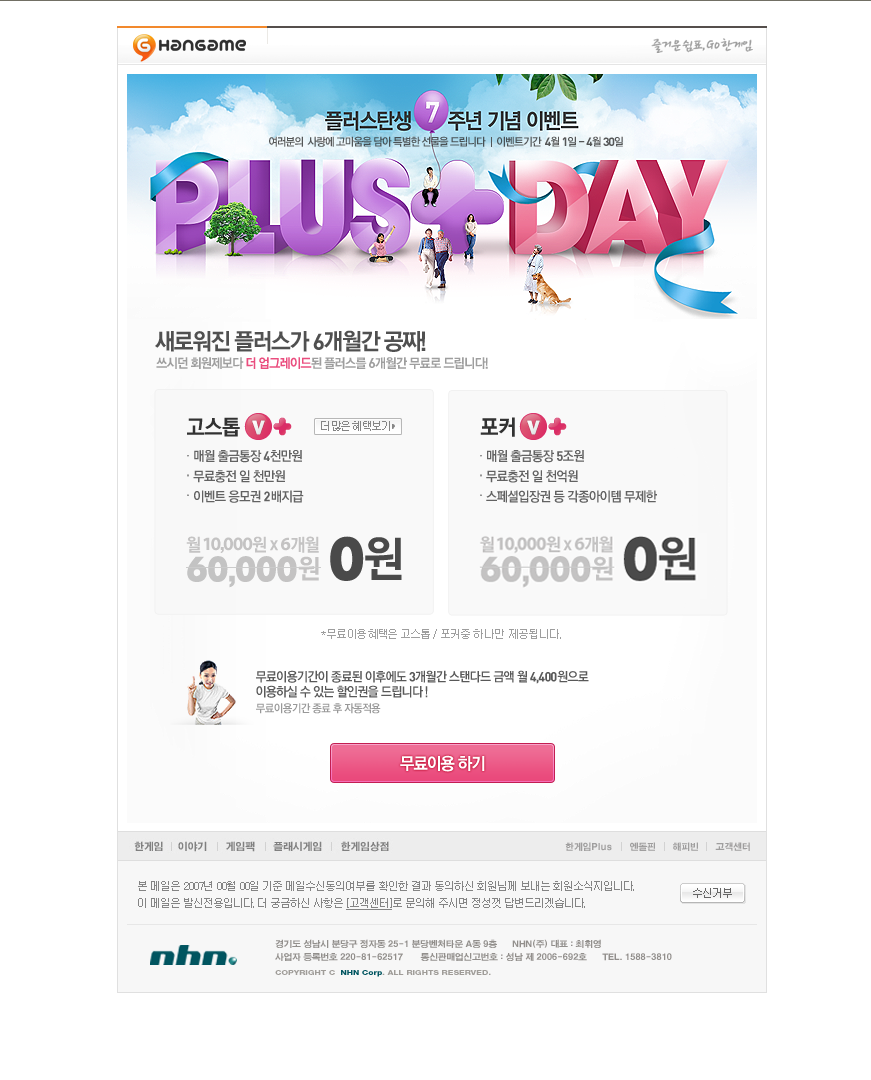
<style>
.page{position:relative;width:871px;height:1080px;background:#ffffff}
.page>*{position:absolute;margin:0}
.t1{font:11px "YGO540";letter-spacing:-0.09em;color:#4c5356}
.t2{font:11px "YGO540";letter-spacing:-0.08em;color:#545657}
.t3{font:12px "Dinbol";letter-spacing:-0.08em;color:#545657}
.t4{font:23px "YGO550";letter-spacing:-0.08em;color:#3d3d3d}
.t5{font:23px "Dinbol";letter-spacing:-0.08em;color:#3d3d3d}
.t6{font:13px "YGO550";letter-spacing:-0.08em;color:#9e9e9e}
.t7{font:13px "YGO550";letter-spacing:-0.08em;color:#ea4d7e}
.t8{font:14px "Dinbol";letter-spacing:-0.08em;color:#9e9e9e}
.t9{font:21.5px "YGO550";letter-spacing:-0.05em;color:#323232}
.t10{font:10.6px "YDIWebDotum";letter-spacing:-0.05em;color:#848484}
.t11{font:10.6px "Gulim";letter-spacing:-0.05em;color:#848484}
.t12{font:13.4px/20.2px "YGO540";letter-spacing:-0.065em;color:#626262;scale:0.96 1}
.t13{font:13.4px/20.2px "Dinbol";letter-spacing:-0.065em;color:#626262;scale:0.96 1}
.t14{font:18.7px "MyriadBold";letter-spacing:-0.08em;color:#c4c3c3}
.t15{font:17.8px "YGO550";letter-spacing:-0.08em;color:#c4c3c3;scale:0.97 1}
.t16{font:18.7px "Helvetica75-Bold";letter-spacing:-0.08em;color:#c4c3c3}
.t17{font:59.7px "FuturaBQ-Bold";letter-spacing:-0.04em;color:#4a4a4a;scale:0.95 1}
.t18{font:48.3px "YGO550";letter-spacing:-0.08em;color:#4a4a4a}
.t19{font:34.7px "FuturaBQ-Bold";letter-spacing:-0.04em;color:#c4c3c3;scale:0.95 1}
.t20{font:34.7px "Helvetica75-Bold";letter-spacing:-0.04em;color:#c4c3c3;scale:0.95 1}
.t21{font:26.7px "YGO550";letter-spacing:-0.08em;color:#c4c3c3}
.t22{font:11px "YDIWebDotum";color:#9e9e9e}
.t23{font:13px/14.9px "YGO540";letter-spacing:-0.07em;color:#595959;scale:0.96 1}
.t24{font:13px/14.9px "Dinbol";letter-spacing:-0.07em;color:#595959;scale:0.96 1}
.t25{font:11px "YGO540";letter-spacing:-0.06em;color:#999999;scale:0.97 1}
.t26{font:17px "YGO550";letter-spacing:-0.08em;color:#ffffff;text-transform:uppercase;scale:0.97 1}
</style>
<div class="page">
<p class="t1" style="left:269px;top:136px;width:217px;height:11px">여러분의  사랑에 고마움을 담아 특별한 선물을 드립니다</p>
<p class="t2" style="left:497px;top:136px;width:126px;height:11px">이벤트기간  <span class="t3">4</span>월 <span class="t3">1</span>일 - <span class="t3">4</span>월 <span class="t3">30</span>일</p>
<p class="t4" style="left:155px;top:330px;width:271px;height:22px;opacity:0.9">새로워진 플러스가 <span class="t5">6</span>개월간 공짜!</p>
<p class="t6" style="left:156px;top:357px;width:332px;height:12px">쓰시던 회원제보다 <span class="t7">더 업그레이드</span>된 플러스를 <span class="t8">6</span>개월간 무료로 드립니다!</p>
<p class="t9" style="left:187px;top:417px;width:53px;height:20px">고스톱</p>
<p class="t10" style="left:321px;top:421px;width:69px;height:10px">더 많은 <span class="t11">혜택보기</span></p>
<p class="t9" style="left:480px;top:417px;width:35px;height:20px">포커</p>
<p class="t12" style="left:193px;top:450px;width:111px;height:53px">매월 출금통장 <span class="t13">4</span>천만원  <br>무료충전 일 천만원<br>이벤트 응모권 <span class="t13">2</span>배지급</p>
<p class="t12" style="left:486px;top:450px;width:171px;height:53px">매월 출금통장 <span class="t13">5</span>조원  <br>무료충전 일 천억원<br>스페셜입장권 등 각종아이템 무제한</p>
<p class="t14" style="left:186px;top:536px;width:133px;height:17px"><span class="t15">월 </span>10<span class="t16">,</span>000<span class="t15">원 x </span>6<span class="t15">개월</span></p>
<p class="t17" style="left:330px;top:536px;width:34px;height:45px">0</p>
<p class="t18" style="left:365px;top:537px;width:37px;height:43px">원</p>
<p class="t19" style="left:187px;top:556px;width:110px;height:32px">60<span class="t20">,</span>000</p>
<p class="t21" style="left:298px;top:556px;width:21px;height:25px">원</p>
<p class="t22" style="left:321px;top:629px;width:240px;height:10px">*무료이용혜택은 고스톱/  포커중 하나만  제공됩니다.</p>
<p class="t23" style="left:256px;top:670px;width:333px;height:28px">무료이용기간이 종료된 이후에도 <span class="t24">3</span>개월간 스탠다드 금액 월 <span class="t24">4,400</span>원으로 <br>이용하실 수 있는 할인권을 드립니다 !</p>
<p class="t25" style="left:256px;top:703px;width:125px;height:11px">무료이용기간 종료 후 자동적용</p>
<p class="t26" style="left:400px;top:755px;width:85px;height:17px">무료이용 하기</p>
</div>
